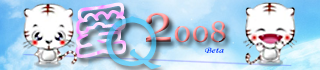
<style>
.page{position:relative;width:320px;height:70px}
.page>*{position:absolute;margin:0}
.t1{font:52.7px "STCaiyun";font-weight:bold}
.t2{font:86.1px "FZSTK--GBK1-0"}
.t3{font:29.3px "Georgia"}
.t4{font:53.6px "Georgia"}
.t5{font:8.5px "MonotypeCorsiva";scale:1.34 1}
</style>
<div class="page">
<p class="t1" style="left:75px;top:2px;width:51px;height:56px;rotate:-6deg">爱</p>
<p class="t2" style="left:106px;top:16px;width:56px;height:53px">Q</p>
<p class="t3" style="left:146px;top:12px;width:80px;height:31px"><span class="t4">2</span>008</p>
<p class="t5" style="left:205px;top:47px;width:19px;height:6px">Beta</p>
</div>
